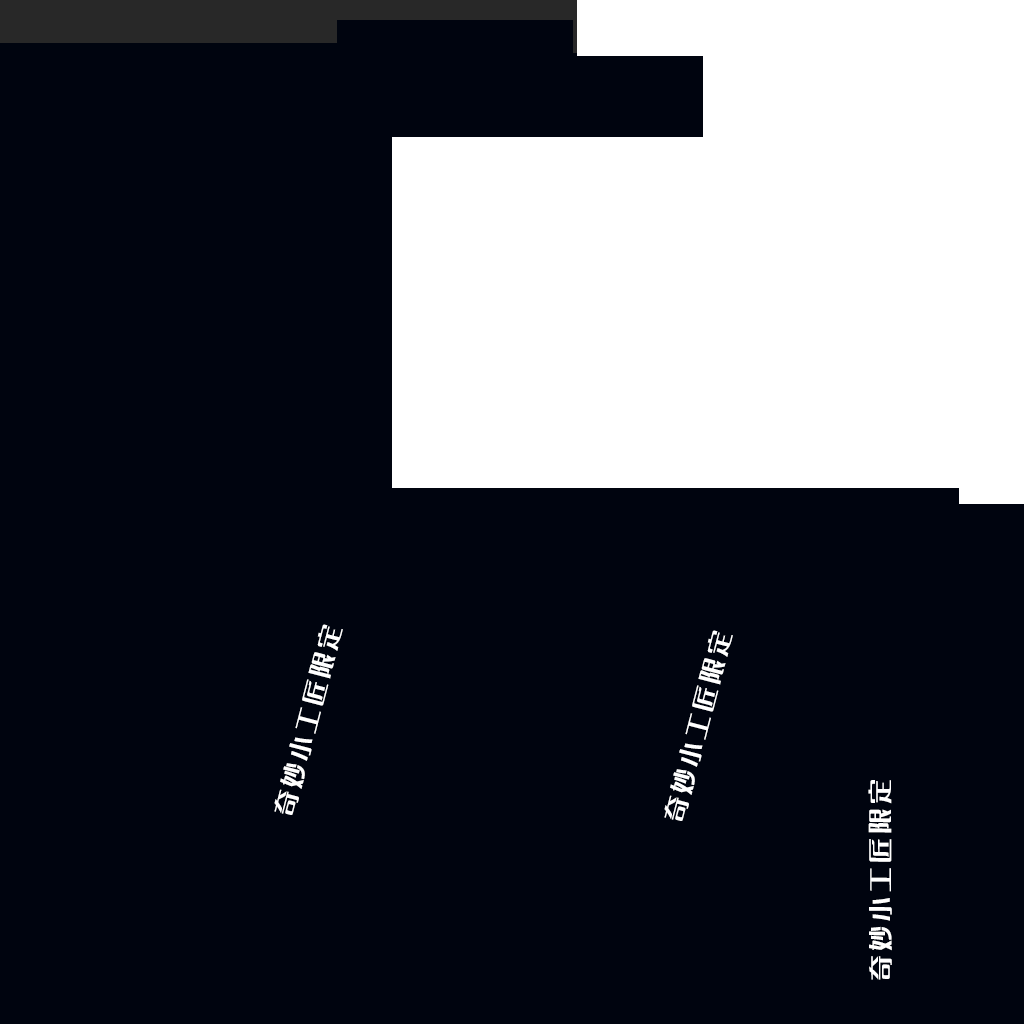
<style>
.page{position:relative;width:1024px;height:1024px;background:#00040f}
.page>*{position:absolute;margin:0}
.t1{font:23.8px "MFLangQian_Noncommercial-Regular";letter-spacing:0.2em;color:#ffffff}
</style>
<div class="page">
<p class="t1" style="left:274px;top:624px;width:69px;height:191px;rotate:-75deg">奇妙小工匠限定</p>
<p class="t1" style="left:664px;top:630px;width:69px;height:191px;rotate:-75deg">奇妙小工匠限定</p>
<p class="t1" style="left:868px;top:780px;width:24px;height:200px;rotate:-90deg">奇妙小工匠限定</p>
</div>
